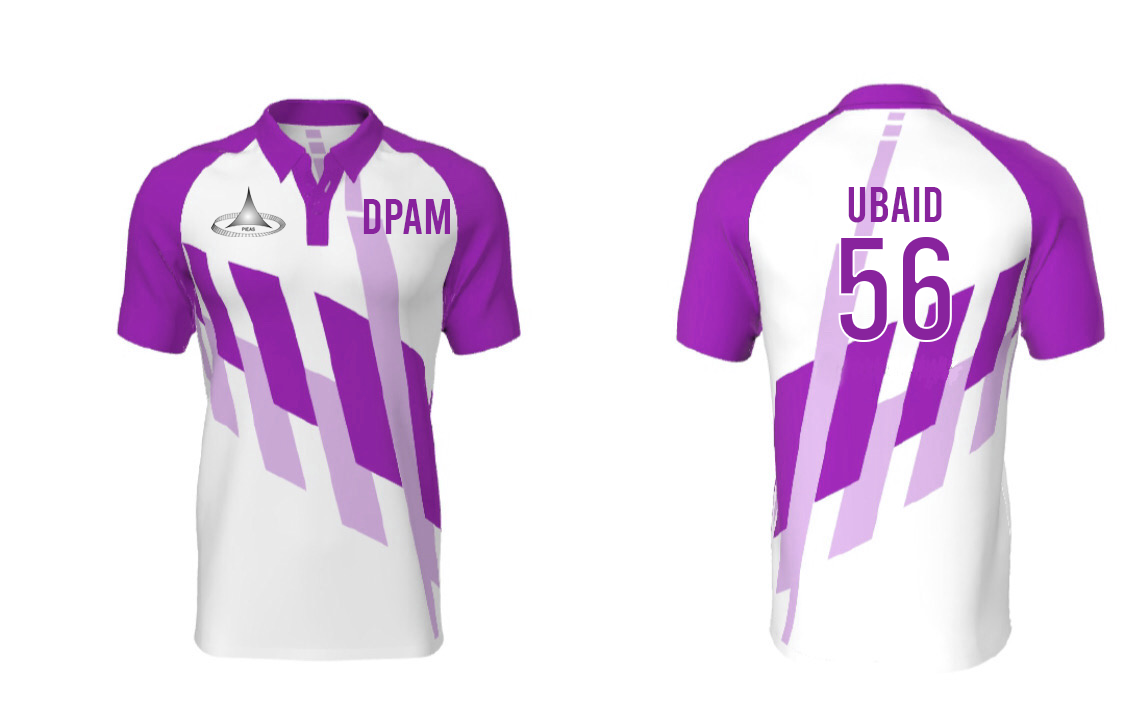
<style>
.page{position:relative;width:1125px;height:706px;background:#ffffff}
.page>*{position:absolute;margin:0}
.t1{font:50px "Bebas-Regular";color:#88239d}
.t2{font:150px "Bebas-Regular";color:#88239d}
</style>
<div class="page">
<p class="t1" style="left:848px;top:187px;width:94px;height:36px">UBAID</p>
<p class="t1" style="left:363px;top:199px;width:87px;height:35px">DPAM</p>
<p class="t2" style="left:838px;top:235px;width:114px;height:107px">56</p>
</div>
